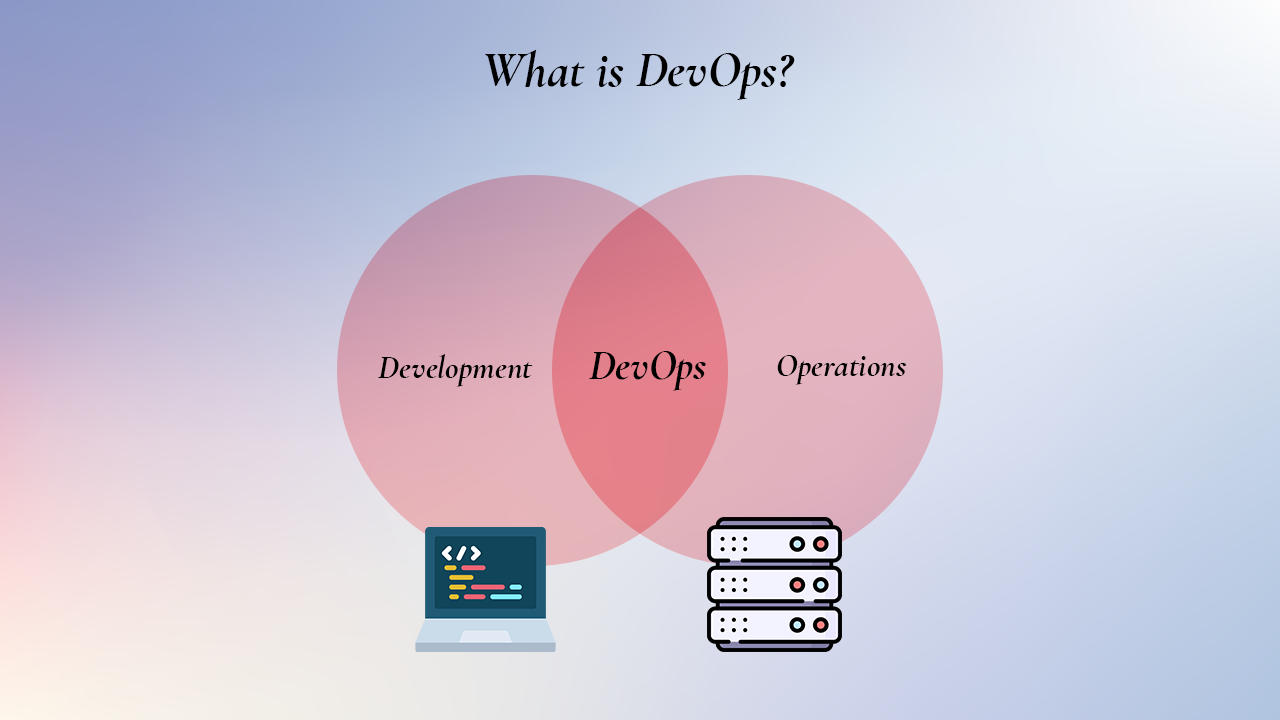
<style>
.page{position:relative;width:1280px;height:720px}
.page>*{position:absolute;margin:0}
.t1{font:50.1px "CormorantGaramond-BoldItalic";color:#000000}
.t2{font:41.9px "CormorantGaramond-BoldItalic";color:#000000}
.t3{font:32.9px "CormorantGaramond-BoldItalic";color:#000000}
</style>
<div class="page">
<p class="t1" style="left:485px;top:50px;width:310px;height:50px">What is DevOps?</p>
<p class="t2" style="left:589px;top:351px;width:117px;height:40px">DevOps</p>
<p class="t3" style="left:378px;top:354px;width:155px;height:33px">Development</p>
<p class="t3" style="left:777px;top:355px;width:129px;height:30px">Operations</p>
</div>
